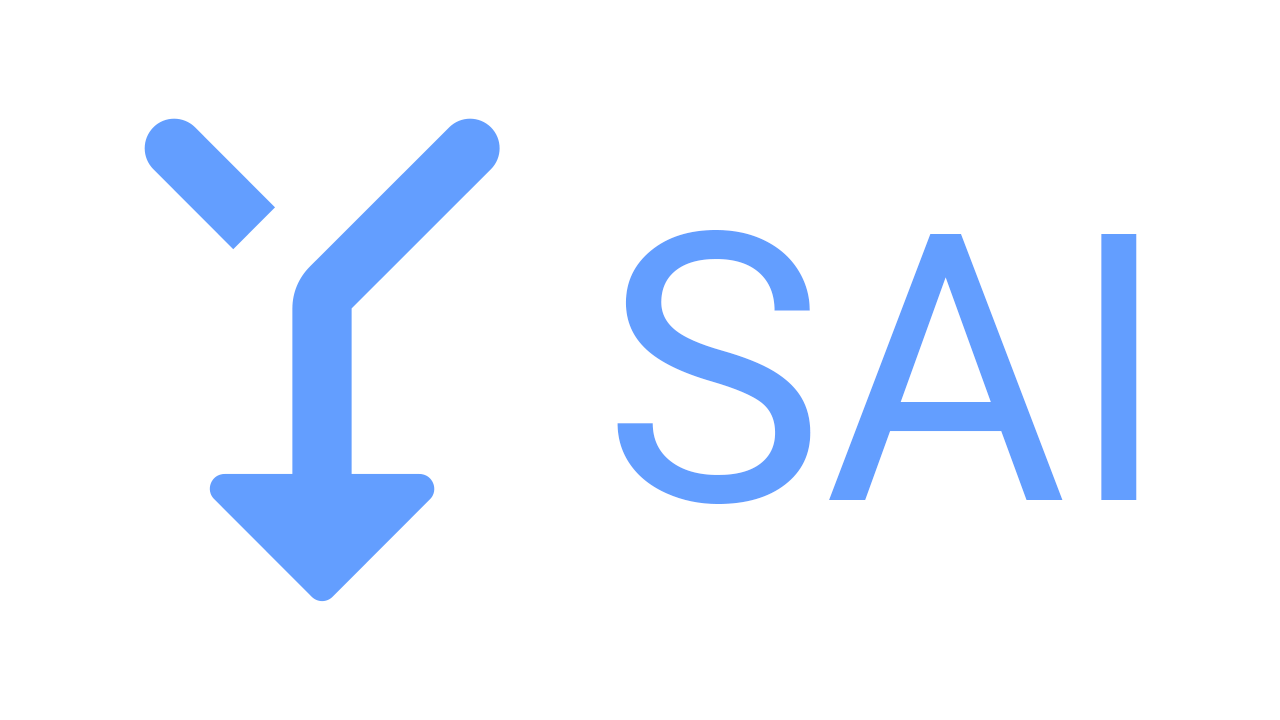
<style>
.page{position:relative;width:1280px;height:720px;background:#ffffff}
.page>*{position:absolute;margin:0}
.t1{font:373.6px "Roboto-Regular";color:#639eff}
</style>
<div class="page">
<p class="t1" style="left:617px;top:230px;width:520px;height:274px">SAI</p>
</div>
